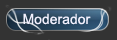
<style>
.page{position:relative;width:117px;height:40px;background:#333333}
.page>*{position:absolute;margin:0}
.t1{font:14px "ArialMT";color:#ffffff}
</style>
<div class="page">
<p class="t1" style="left:23px;top:13px;width:68px;height:12px">Moderador</p>
</div>
